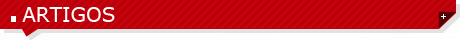
<style>
.page{position:relative;width:460px;height:40px;background:#b80107}
.page>*{position:absolute;margin:0}
.t1{font:20px "Verdana";color:#ffffff}
</style>
<div class="page">
<p class="t1" style="left:22px;top:7px;width:93px;height:15px">ARTIGOS</p>
</div>
